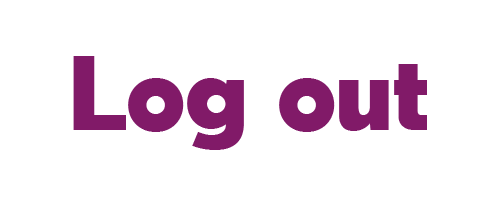
<style>
.page{position:relative;width:500px;height:200px;background:#ffffff}
.page>*{position:absolute;margin:0}
.t1{font:94.6px "TabarraBlack";color:#811a68}
</style>
<div class="page">
<p class="t1" style="left:73px;top:56px;width:354px;height:94px">Log out</p>
</div>
